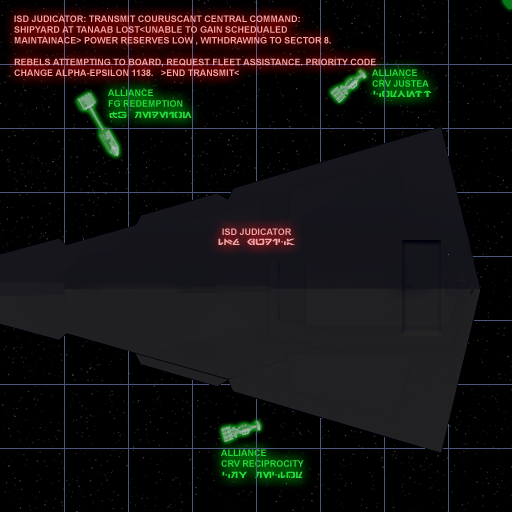
<style>
.page{position:relative;width:512px;height:512px;background:#000000}
.page>*{position:absolute;margin:0}
.t1{font:9px "Arial-BoldMT";color:#f2a6a6}
.t2{font:9px "Arial-BoldMT";color:#26d73d}
.t3{font:9px "Galactic-Basic";color:#26d73d}
.t4{font:9px "Arial-BoldMT";color:#f3a6a6}
.t5{font:9px "Galactic-Basic";color:#f2a6a6}
</style>
<div class="page">
<p class="t1" style="left:14px;top:15px;width:362px;height:61px">ISD JUDICATOR: TRANSMIT COURUSCANT CENTRAL COMMAND:<br>SHIPYARD AT TANAAB LOST&lt;UNABLE TO GAIN SCHEDUALED<br>MAINTAINACE&gt; POWER RESERVES LOW , WITHDRAWING TO SECTOR 8. <br><br>REBELS ATTEMPTING TO BOARD, REQUEST FLEET ASSISTANCE. PRIORITY CODE<br>CHANGE ALPHA-EPSILON 1138.   &gt;END TRANSMIT&lt;</p>
<p class="t2" style="left:372px;top:69px;width:57px;height:18px">ALLIANCE<br>CRV JUSTEA</p>
<p class="t2" style="left:108px;top:89px;width:75px;height:18px">ALLIANCE<br>FG REDEMPTION</p>
<p class="t3" style="left:373px;top:90px;width:59px;height:7px">Corvett</p>
<p class="t3" style="left:109px;top:111px;width:83px;height:7px">FG REDEION</p>
<p class="t4" style="left:222px;top:228px;width:70px;height:7px">ISD JUDICATOR</p>
<p class="t5" style="left:218px;top:238px;width:77px;height:7px">isd JUDICA</p>
<p class="t2" style="left:221px;top:449px;width:83px;height:18px">ALLIANCE<br>CRV RECIPROCITY</p>
<p class="t3" style="left:222px;top:471px;width:81px;height:7px">CRV REcipr</p>
</div>
